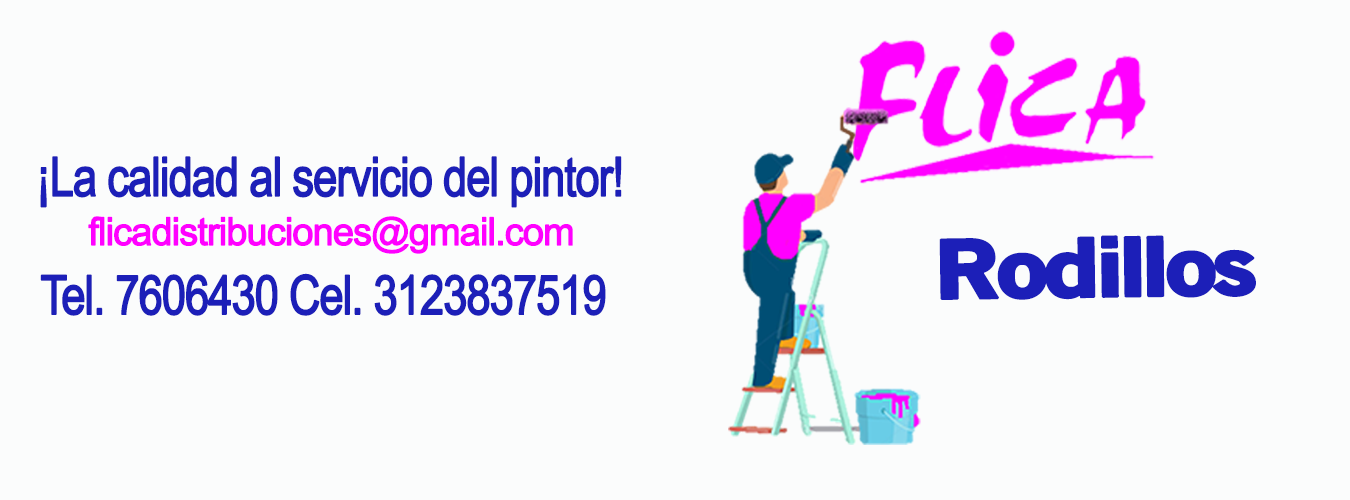
<style>
.page{position:relative;width:1350px;height:500px;background:#fbfcfc}
.page>*{position:absolute;margin:0}
.t1{font:40.6px "ArialMT";letter-spacing:-0.05em;color:#1c1fb8;font-weight:bold;scale:0.8 1}
.t2{font:28.9px "ArialMT";letter-spacing:-0.05em;color:#ff00ff;font-weight:bold}
.t3{font:59.6px "OldSansBlack";letter-spacing:-0.05em;color:#1c1fb8;font-weight:bold;scale:1.23 1}
</style>
<div class="page">
<p class="t1" style="left:40px;top:156px;width:582px;height:52px">¡La calidad al servicio del pintor!</p>
<p class="t2" style="left:88px;top:216px;width:485px;height:38px">flicadistribuciones@gmail.com</p>
<p class="t3" style="left:939px;top:235px;width:317px;height:65px;rotate:-1deg">Rodillos</p>
<p class="t1" style="left:40px;top:273px;width:566px;height:43px">Tel. 7606430 Cel. 3123837519</p>
</div>
